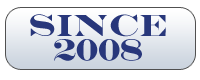
<style>
.page{position:relative;width:200px;height:80px;background:#ffffff}
.page>*{position:absolute;margin:0}
.t1{font:31px/22.5px "EngraversMT-Bold";color:#28377b}
</style>
<div class="page">
<p class="t1" style="left:30px;top:14px;width:136px;height:47px;text-align:center">Since<br>2008</p>
</div>
